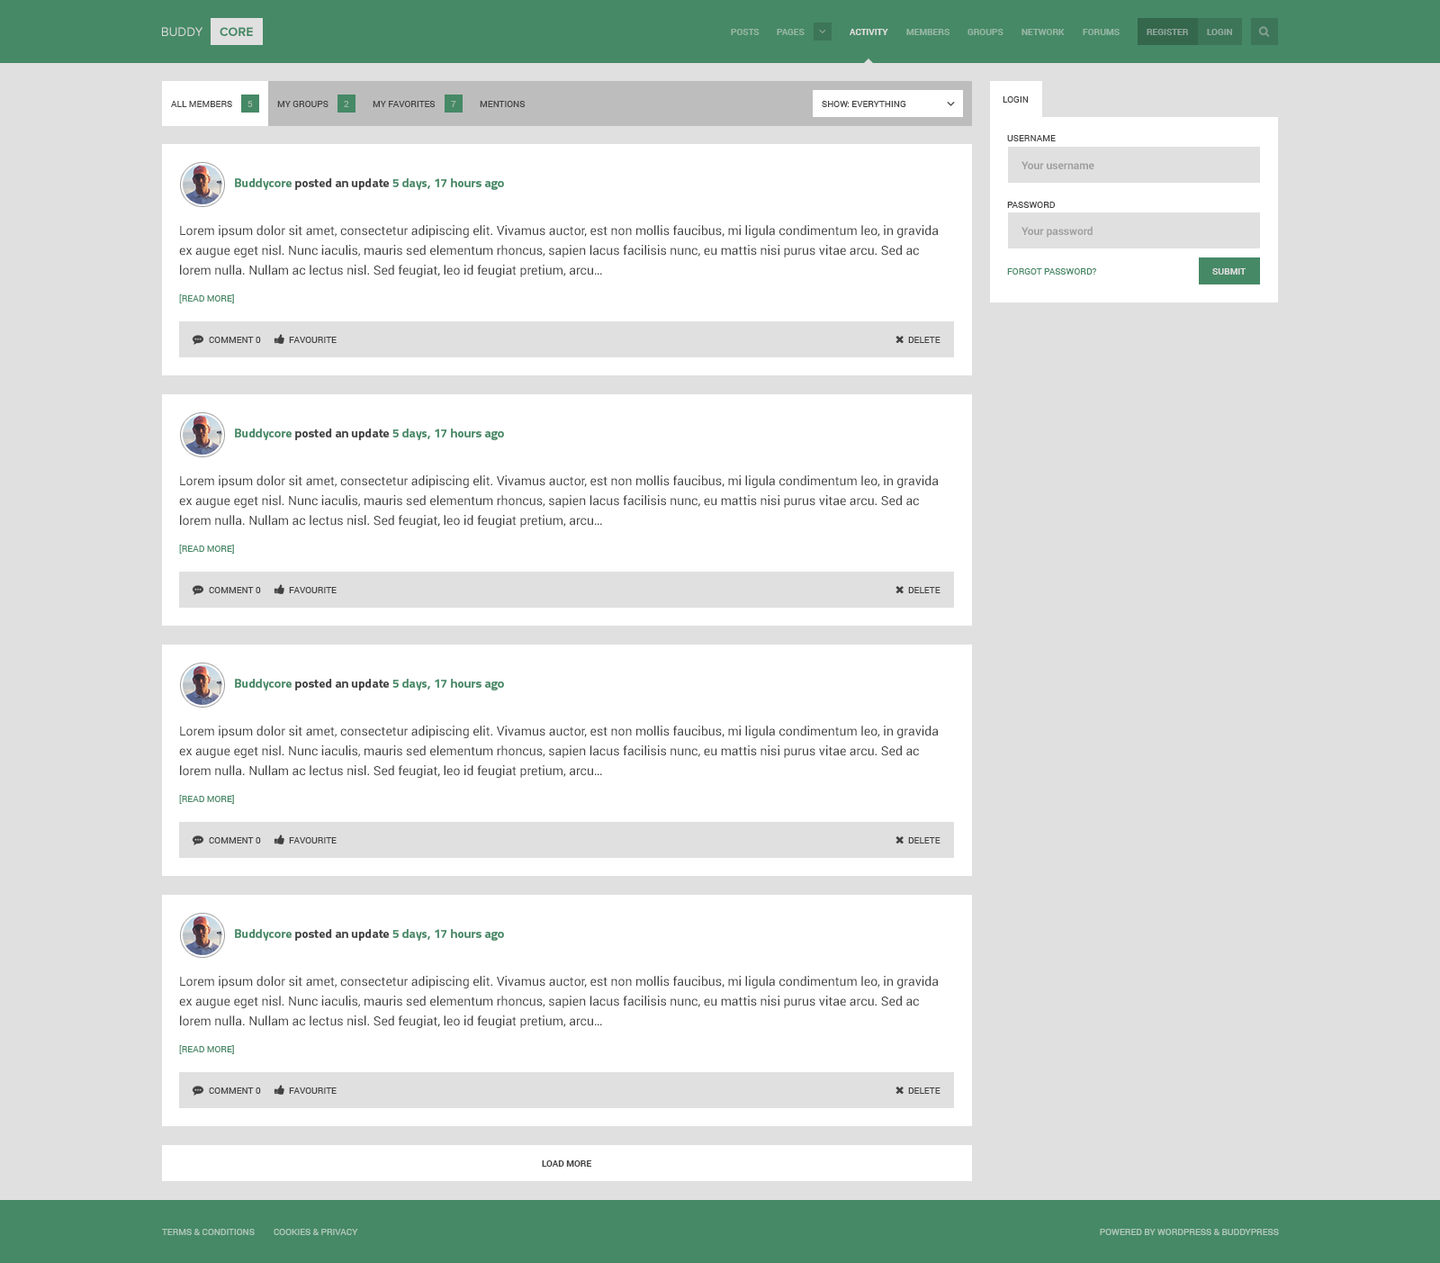
<style>
.page{position:relative;width:1440px;height:1263px;background:#e0e0e0}
.page>*{position:absolute;margin:0}
.t1{font:12.6px "ProximaNova-Regular";color:#e0e0e0;text-transform:uppercase}
.t2{font:12.6px "ProximaNova-Bold";color:#468966;text-transform:uppercase}
.t3{font:9px "Roboto-Bold";color:#97b7a5;text-transform:uppercase}
.t4{font:9px "Roboto-Bold";color:#e0e0e0;text-transform:uppercase}
.t5{font:9px "Roboto-Bold";color:#90a699;text-transform:uppercase}
.t6{font:9px "Roboto-Bold";color:#93ad9e;text-transform:uppercase}
.t7{font:9px "Roboto-Regular";color:#424242;text-transform:uppercase}
.t8{font:9px "Roboto-Regular";color:#9fb8aa;text-transform:uppercase}
.t9{font:10.8px "Roboto-Bold";color:#9e9e9e}
.t10{font:12.6px "Titillium-Bold";color:#468966}
.t11{font:12.6px "Titillium-Bold";color:#424242}
.t12{font:12.6px/19.8px "Roboto-Regular";color:#424242}
.t13{font:9px "Roboto-Regular";color:#468966;text-transform:uppercase}
.t14{font:9px "Roboto-Bold";color:#424242;text-transform:uppercase}
.t15{font:9px "Roboto-Regular";color:#b2cabd;text-transform:uppercase}
</style>
<div class="page">
<p class="t1" style="left:162px;top:27px;width:40px;height:9px">Buddy</p>
<p class="t2" style="left:220px;top:27px;width:33px;height:9px">Core</p>
<p class="t3" style="left:731px;top:29px;width:29px;height:6px">Posts</p>
<p class="t3" style="left:777px;top:29px;width:28px;height:6px">Pages</p>
<p class="t4" style="left:850px;top:29px;width:38px;height:6px">Activity</p>
<p class="t3" style="left:906px;top:29px;width:44px;height:6px">Members</p>
<p class="t3" style="left:968px;top:29px;width:36px;height:6px">Groups</p>
<p class="t3" style="left:1022px;top:29px;width:43px;height:6px">Network</p>
<p class="t3" style="left:1083px;top:29px;width:37px;height:6px">Forums</p>
<p class="t5" style="left:1147px;top:29px;width:42px;height:6px">Register</p>
<p class="t6" style="left:1207px;top:29px;width:25px;height:6px">Login</p>
<p class="t7" style="left:171px;top:101px;width:61px;height:6px">All members</p>
<p class="t8" style="left:248px;top:101px;width:5px;height:6px">5</p>
<p class="t7" style="left:277px;top:101px;width:51px;height:6px">My Groups</p>
<p class="t8" style="left:344px;top:101px;width:5px;height:6px">2</p>
<p class="t7" style="left:373px;top:101px;width:63px;height:6px">My favorites</p>
<p class="t8" style="left:451px;top:101px;width:5px;height:6px">7</p>
<p class="t7" style="left:480px;top:101px;width:46px;height:6px">Mentions</p>
<p class="t7" style="left:822px;top:101px;width:84px;height:6px">Show: Everything</p>
<p class="t7" style="left:1003px;top:96px;width:26px;height:7px">Login</p>
<p class="t7" style="left:1007px;top:135px;width:49px;height:6px">Username</p>
<p class="t9" style="left:1022px;top:161px;width:72px;height:8px">Your username</p>
<p class="t10" style="left:235px;top:178px;width:269px;height:12px">Buddycore <span class="t11">posted an update </span>5 days, 17 hours ago</p>
<p class="t7" style="left:1007px;top:202px;width:48px;height:6px">Password</p>
<p class="t12" style="left:179px;top:225px;width:760px;height:52px">Lorem ipsum dolor sit amet, consectetur adipiscing elit. Vivamus auctor, est non mollis faucibus, mi ligula condimentum leo, in gravida ex augue eget nisl. Nunc iaculis, mauris sed elementum rhoncus, sapien lacus facilisis nunc, eu mattis nisi purus vitae arcu. Sed ac lorem nulla. Nullam ac lectus nisl. Sed feugiat, leo id feugiat pretium, arcu…</p>
<p class="t9" style="left:1022px;top:226px;width:71px;height:12px">Your password</p>
<p class="t13" style="left:1007px;top:268px;width:89px;height:6px">Forgot password?</p>
<p class="t4" style="left:1212px;top:268px;width:34px;height:6px">Submit</p>
<p class="t13" style="left:179px;top:294px;width:55px;height:9px">[Read More]</p>
<p class="t7" style="left:209px;top:337px;width:52px;height:6px">Comment 0</p>
<p class="t7" style="left:289px;top:337px;width:48px;height:6px">Favourite</p>
<p class="t7" style="left:908px;top:337px;width:32px;height:6px">Delete</p>
<p class="t10" style="left:235px;top:428px;width:269px;height:12px">Buddycore <span class="t11">posted an update </span>5 days, 17 hours ago</p>
<p class="t12" style="left:179px;top:475px;width:760px;height:52px">Lorem ipsum dolor sit amet, consectetur adipiscing elit. Vivamus auctor, est non mollis faucibus, mi ligula condimentum leo, in gravida ex augue eget nisl. Nunc iaculis, mauris sed elementum rhoncus, sapien lacus facilisis nunc, eu mattis nisi purus vitae arcu. Sed ac lorem nulla. Nullam ac lectus nisl. Sed feugiat, leo id feugiat pretium, arcu…</p>
<p class="t13" style="left:179px;top:544px;width:55px;height:10px">[Read More]</p>
<p class="t7" style="left:209px;top:587px;width:52px;height:6px">Comment 0</p>
<p class="t7" style="left:289px;top:587px;width:48px;height:6px">Favourite</p>
<p class="t7" style="left:908px;top:587px;width:32px;height:6px">Delete</p>
<p class="t10" style="left:235px;top:679px;width:269px;height:11px">Buddycore <span class="t11">posted an update </span>5 days, 17 hours ago</p>
<p class="t12" style="left:179px;top:725px;width:760px;height:53px">Lorem ipsum dolor sit amet, consectetur adipiscing elit. Vivamus auctor, est non mollis faucibus, mi ligula condimentum leo, in gravida ex augue eget nisl. Nunc iaculis, mauris sed elementum rhoncus, sapien lacus facilisis nunc, eu mattis nisi purus vitae arcu. Sed ac lorem nulla. Nullam ac lectus nisl. Sed feugiat, leo id feugiat pretium, arcu…</p>
<p class="t13" style="left:179px;top:795px;width:55px;height:9px">[Read More]</p>
<p class="t7" style="left:209px;top:837px;width:52px;height:6px">Comment 0</p>
<p class="t7" style="left:289px;top:837px;width:48px;height:6px">Favourite</p>
<p class="t7" style="left:908px;top:837px;width:32px;height:6px">Delete</p>
<p class="t10" style="left:235px;top:929px;width:269px;height:11px">Buddycore <span class="t11">posted an update </span>5 days, 17 hours ago</p>
<p class="t12" style="left:179px;top:976px;width:760px;height:52px">Lorem ipsum dolor sit amet, consectetur adipiscing elit. Vivamus auctor, est non mollis faucibus, mi ligula condimentum leo, in gravida ex augue eget nisl. Nunc iaculis, mauris sed elementum rhoncus, sapien lacus facilisis nunc, eu mattis nisi purus vitae arcu. Sed ac lorem nulla. Nullam ac lectus nisl. Sed feugiat, leo id feugiat pretium, arcu…</p>
<p class="t13" style="left:179px;top:1045px;width:55px;height:9px">[Read More]</p>
<p class="t7" style="left:209px;top:1087px;width:52px;height:7px">Comment 0</p>
<p class="t7" style="left:289px;top:1087px;width:48px;height:7px">Favourite</p>
<p class="t7" style="left:908px;top:1087px;width:32px;height:7px">Delete</p>
<p class="t14" style="left:542px;top:1160px;width:50px;height:6px">Load more</p>
<p class="t15" style="left:162px;top:1228px;width:93px;height:7px">Terms &amp; Conditions</p>
<p class="t15" style="left:274px;top:1228px;width:84px;height:7px">Cookies &amp; Privacy</p>
<p class="t15" style="left:1100px;top:1228px;width:179px;height:7px">Powered by WordPress &amp; BuddyPress</p>
</div>
